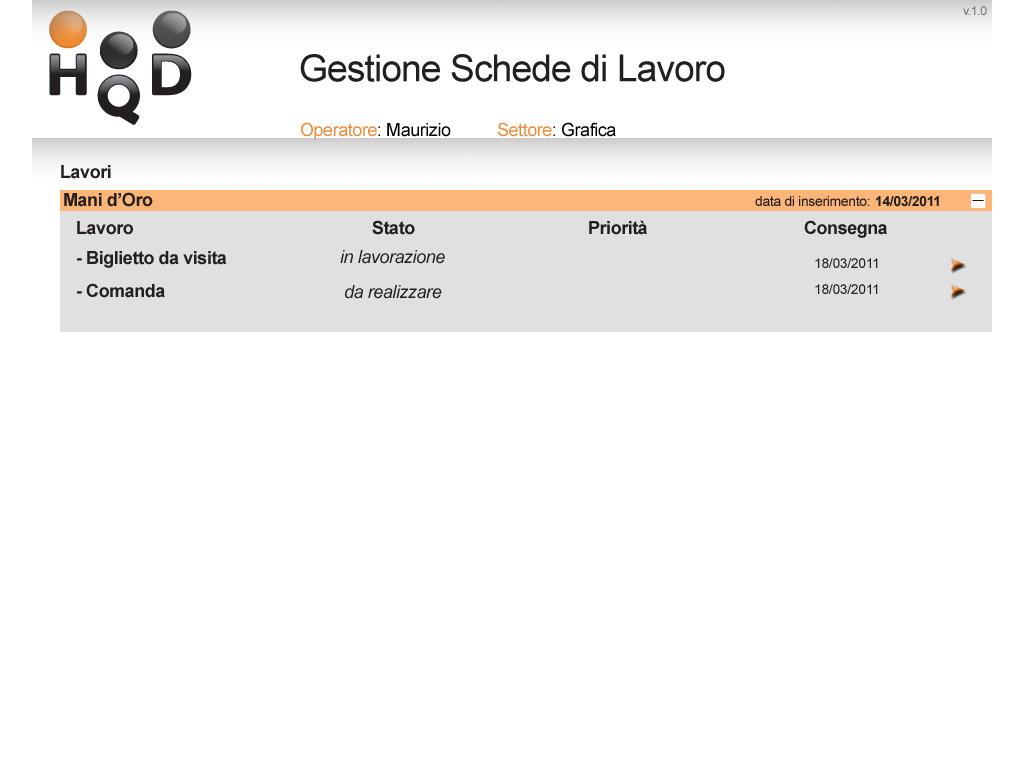
<style>
.page{position:relative;width:1024px;height:768px;background:#ffffff}
.page>*{position:absolute;margin:0}
.t1{font:12px "ArialMT";letter-spacing:-0.025em;color:#6d6b6c}
.t2{font:37.2px "ArialMT";letter-spacing:-0.025em;color:#231f20}
.t3{font:18px "ArialMT";letter-spacing:-0.025em;color:#000000}
.t4{font:18px "ArialMT";letter-spacing:-0.025em;color:#ed8c38}
.t5{font:18px "Arial-BoldMT";letter-spacing:-0.025em;color:#231f20}
.t6{font:14px "ArialMT";letter-spacing:-0.025em;color:#231f20}
.t7{font:14px "Arial-BoldMT";letter-spacing:-0.025em;color:#231f20}
.t8{font:18px "Arial-ItalicMT";letter-spacing:-0.025em;color:#231f20}
</style>
<div class="page">
<p class="t1" style="left:963px;top:6px;width:24px;height:9px">v.1.0</p>
<p class="t2" style="left:300px;top:54px;width:425px;height:28px">Gestione Schede di Lavoro</p>
<p class="t3" style="left:301px;top:122px;width:150px;height:18px"><span class="t4">Operatore</span>: Maurizio</p>
<p class="t3" style="left:498px;top:122px;width:118px;height:15px"><span class="t4">Settore</span>: Grafica</p>
<p class="t5" style="left:61px;top:165px;width:50px;height:14px">Lavori</p>
<p class="t5" style="left:64px;top:192px;width:89px;height:15px">Mani d’Oro</p>
<p class="t6" style="left:755px;top:196px;width:115px;height:10px">data di inserimento:</p>
<p class="t7" style="left:876px;top:196px;width:63px;height:11px">14/03/2011</p>
<p class="t5" style="left:77px;top:221px;width:56px;height:14px">Lavoro</p>
<p class="t5" style="left:372px;top:220px;width:43px;height:15px">Stato</p>
<p class="t5" style="left:589px;top:220px;width:58px;height:15px">Priorità</p>
<p class="t5" style="left:804px;top:220px;width:83px;height:18px">Consegna</p>
<p class="t5" style="left:77px;top:251px;width:150px;height:17px">- Biglietto da visita</p>
<p class="t8" style="left:340px;top:250px;width:105px;height:14px">in lavorazione</p>
<p class="t6" style="left:815px;top:258px;width:63px;height:10px">18/03/2011</p>
<p class="t5" style="left:77px;top:283px;width:88px;height:15px">- Comanda</p>
<p class="t8" style="left:345px;top:285px;width:97px;height:14px">da realizzare</p>
<p class="t6" style="left:815px;top:284px;width:63px;height:10px">18/03/2011</p>
</div>
